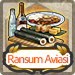
<style>
.page{position:relative;width:75px;height:75px}
.page>*{position:absolute;margin:0}
.t1{font:12px "AdobeClean-Regular";letter-spacing:-0.08em;color:#ff5a00}
</style>
<div class="page">
<p class="t1" style="left:8px;top:54px;width:61px;height:10px">Ransum Aviasi</p>
</div>
